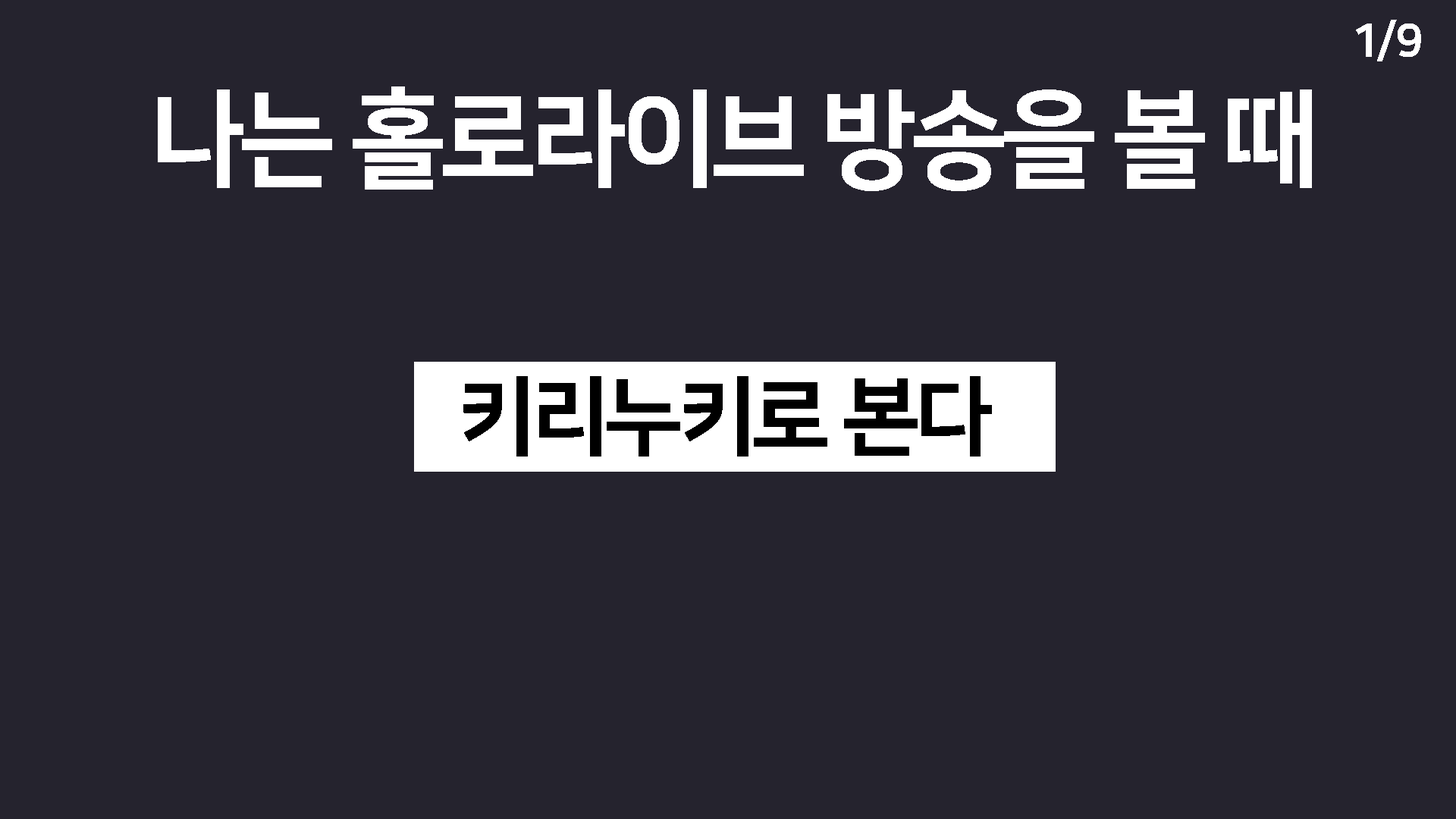
<style>
.page{position:relative;width:1456px;height:819px;background:#25232e}
.page>*{position:absolute;margin:0}
.t1{font:45.5px "NanumSquareEB";letter-spacing:-0.06em;color:#ffffff}
.t2{font:106.2px "NanumSquareEB";letter-spacing:-0.06em;color:#ffffff}
.t3{font:86.4px "NanumSquareEB";letter-spacing:-0.06em;color:#000000}
</style>
<div class="page">
<p class="t1" style="left:1356px;top:20px;width:65px;height:41px">1/9</p>
<p class="t2" style="left:158px;top:86px;width:1154px;height:105px">나는 홀로라이브 방송을 볼 때</p>
<p class="t3" style="left:463px;top:376px;width:529px;height:81px">키리누키로 본다</p>
</div>
